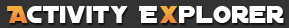
<style>
.page{position:relative;width:289px;height:28px;background:#333333}
.page>*{position:absolute;margin:0}
.t1{font:26.3px "DistantGalaxy";color:#f09b3a}
.t2{font:26.3px "DistantGalaxy";color:#ffffff}
</style>
<div class="page">
<p class="t1" style="left:7px;top:6px;width:21px;height:17px">A</p>
<p class="t2" style="left:27px;top:6px;width:101px;height:17px">ctivity</p>
<p class="t2" style="left:139px;top:6px;width:145px;height:17px">E  plorer</p>
<p class="t1" style="left:160px;top:6px;width:17px;height:17px">x</p>
</div>
